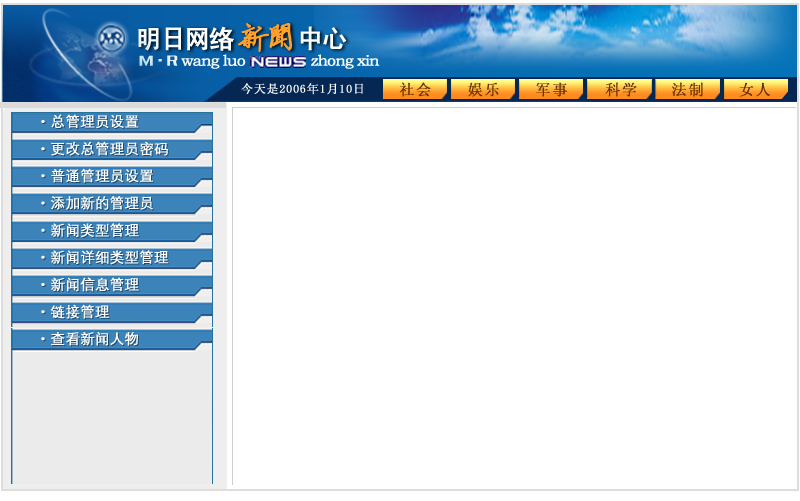
<style>
.page{position:relative;width:800px;height:501px;background:#ffffff}
.page>*{position:absolute;margin:0}
.t1{font:25.7px "SimHei";letter-spacing:-0.08em;color:#ffffff;font-weight:bold}
.t2{font:32.6px "FZYBXSFW--GB1-0";letter-spacing:-0.08em;color:#ffa02b;font-weight:bold}
.t3{font:25.7px "SimSun";letter-spacing:-0.08em;color:#ffa02b;font-weight:bold}
.t4{font:15.3px "STZhongsong";letter-spacing:-0.06em;color:#ffffff;font-weight:bold}
.t5{font:15.3px "FZCQFW--GB1-0";letter-spacing:-0.06em;color:#ffffff;font-weight:bold}
.t6{font:11.7px "SimSun";letter-spacing:0.06em;color:#ffffff;font-weight:bold}
.t7{font:15px "SimSun";letter-spacing:0.1em;color:#6b3000;font-weight:bold}
.t8{font:14.4px/27.2px "FZZDXJW--GB1-0";color:#ffffff;font-weight:bold}
</style>
<div class="page">
<p class="t1" style="left:138px;top:26px;width:209px;height:25px">明日网络     中心</p>
<p class="t2" style="left:238px;top:22px;width:54px;height:30px"><span class="t3">         </span>新闻</p>
<p class="t4" style="left:139px;top:54px;width:241px;height:15px"><span class="t5">M·R</span> wang luo               zhong xin</p>
<p class="t6" style="left:241px;top:83px;width:122px;height:12px">今天是2006年1月10日</p>
<p class="t7" style="left:399px;top:82px;width:372px;height:15px">社会    娱乐    军事    科学    法制    女人</p>
<p class="t8" style="left:41px;top:114px;width:128px;height:232px">·总管理员设置<br>·更改总管理员密码<br>·普通管理员设置<br>·添加新的管理员<br>·新闻类型管理<br>·新闻详细类型管理<br>·新闻信息管理<br>·链接管理<br>·查看新闻人物</p>
</div>
